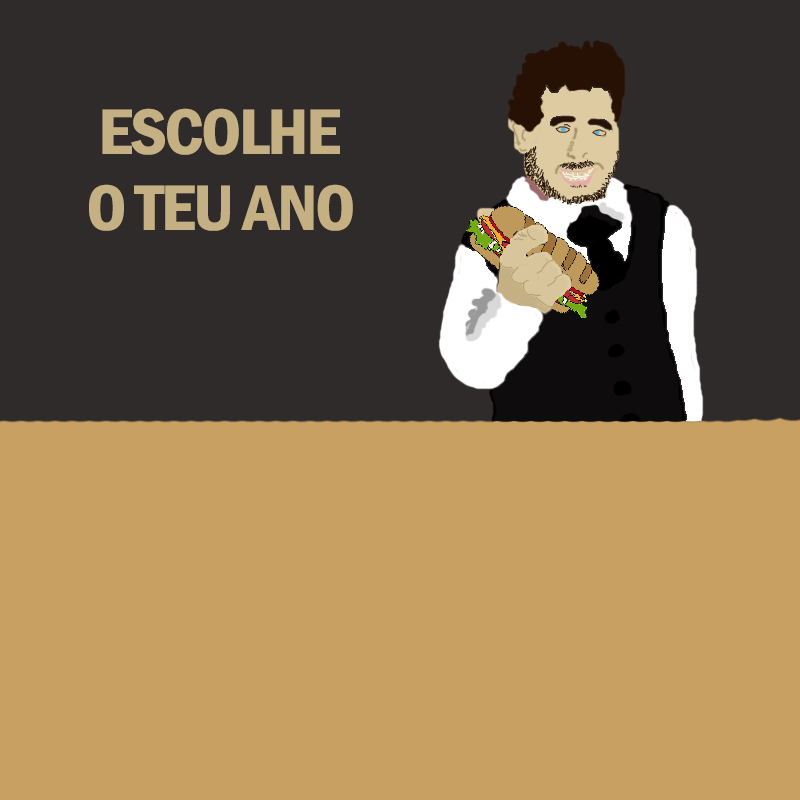
<style>
.page{position:relative;width:800px;height:800px;background:#c8a061}
.page>*{position:absolute;margin:0}
.t1{font:114px "FranklinGothic-DemiCond";letter-spacing:-0.06em;color:#c5b083;font-weight:bold;scale:1.08 1}
</style>
<div class="page">
<p class="t1" style="left:102px;top:108px;width:238px;height:47px">ESCOLHE</p>
<p class="t1" style="left:89px;top:184px;width:264px;height:47px">O TEU ANO</p>
</div>
